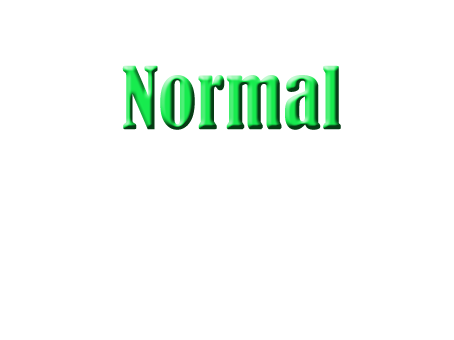
<style>
.page{position:relative;width:454px;height:340px;background:#ffffff}
.page>*{position:absolute;margin:0}
.t1{font:80px "BernardMT-Condensed"}
</style>
<div class="page">
<p class="t1" style="left:122px;top:65px;width:219px;height:65px">Normal</p>
</div>
